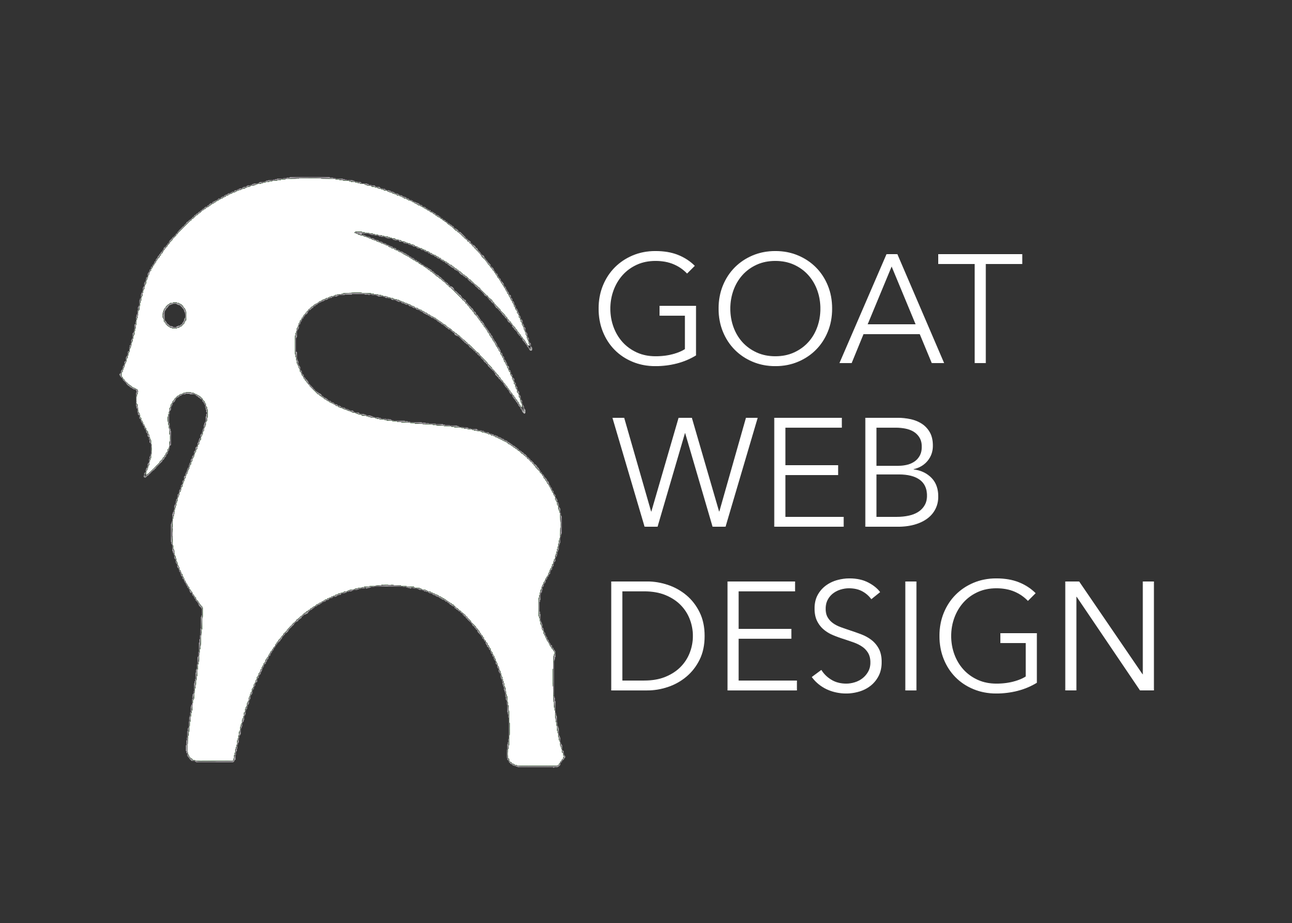
<style>
.page{position:relative;width:1292px;height:923px;background:#333333}
.page>*{position:absolute;margin:0}
.t1{font:153.8px "AvenirNext-Regular";color:#ffffff}
</style>
<div class="page">
<p class="t1" style="left:599px;top:251px;width:424px;height:115px">GOAT</p>
<p class="t1" style="left:611px;top:578px;width:543px;height:115px">DESIGN</p>
</div>
